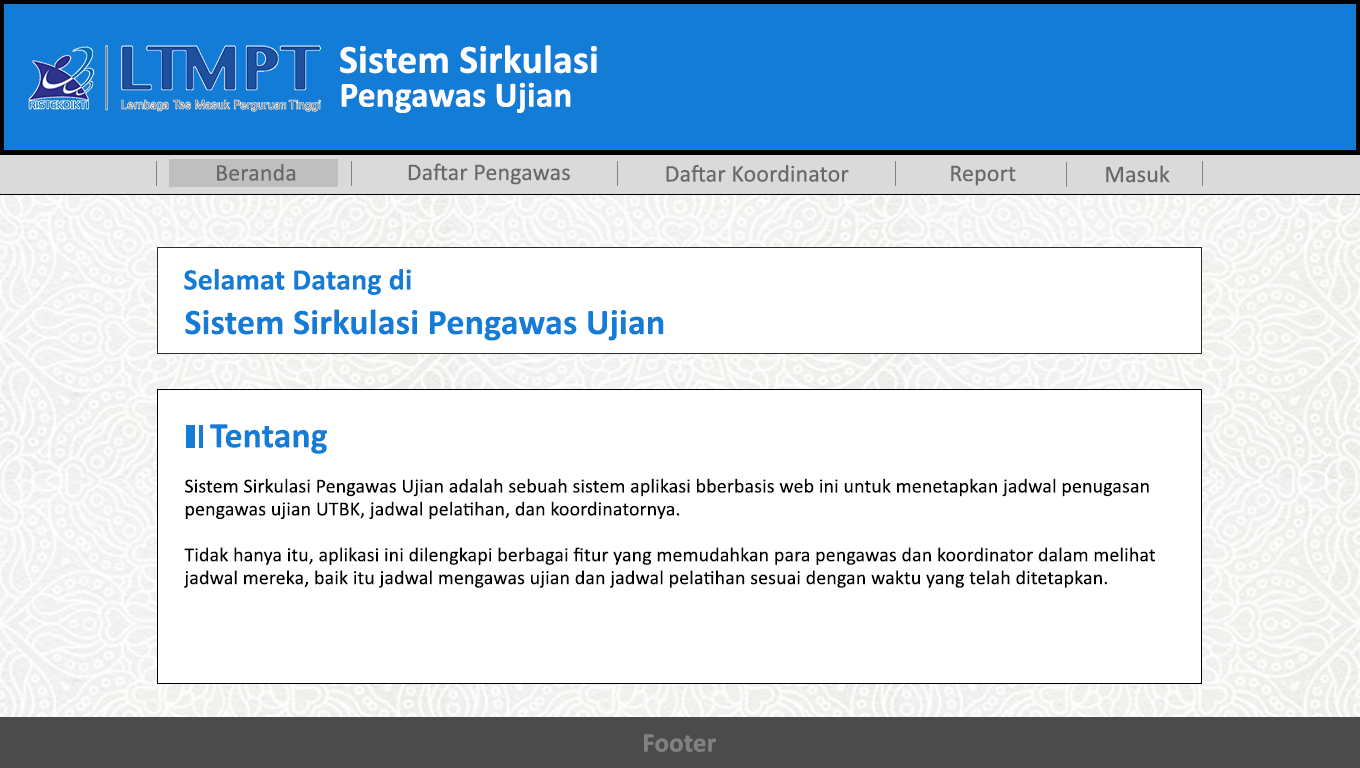
<style>
.page{position:relative;width:1360px;height:768px;background:#ffffff}
.page>*{position:absolute;margin:0}
.t1{font:40.1px "Calibri-Bold";letter-spacing:0.005em;color:#fdfdfd}
.t2{font:35.6px "Calibri-Bold";letter-spacing:0.005em;color:#fffefe}
.t3{font:24px "Calibri";letter-spacing:0.005em;color:#6a6969}
.t4{font:30px "Calibri-Bold";letter-spacing:0.005em;color:#127cd7}
.t5{font:36px "Calibri-Bold";letter-spacing:0.005em;color:#127cd7}
.t6{font:20px/22.9px "Calibri";letter-spacing:0.005em;color:#010102}
.t7{font:27px "Calibri-Bold";letter-spacing:0.005em;color:#818181}
</style>
<div class="page">
<p class="t1" style="left:340px;top:45px;width:257px;height:29px">Sistem Sirkulasi</p>
<p class="t2" style="left:341px;top:82px;width:230px;height:31px">Pengawas Ujian</p>
<p class="t3" style="left:217px;top:164px;width:79px;height:17px">Beranda</p>
<p class="t3" style="left:408px;top:163px;width:162px;height:22px">Daftar Pengawas</p>
<p class="t3" style="left:666px;top:165px;width:183px;height:17px">Daftar Koordinator</p>
<p class="t3" style="left:951px;top:165px;width:65px;height:21px">Report</p>
<p class="t3" style="left:1106px;top:165px;width:64px;height:18px">Masuk</p>
<p class="t4" style="left:184px;top:269px;width:227px;height:26px">Selamat Datang di</p>
<p class="t5" style="left:185px;top:309px;width:479px;height:32px">Sistem Sirkulasi Pengawas Ujian</p>
<p class="t5" style="left:210px;top:424px;width:117px;height:30px">Tentang</p>
<p class="t6" style="left:183px;top:478px;width:972px;height:110px">Sistem Sirkulasi Pengawas Ujian adalah sebuah sistem aplikasi bberbasis web ini untuk menetapkan jadwal penugasan<br>pengawas ujian UTBK, jadwal pelatihan, dan koordinatornya.<br><br>Tidak hanya itu, aplikasi ini dilengkapi berbagai fitur yang memudahkan para pengawas dan koordinator dalam melihat<br>jadwal mereka, baik itu jadwal mengawas ujian dan jadwal pelatihan sesuai dengan waktu yang telah ditetapkan.</p>
<p class="t7" style="left:644px;top:734px;width:72px;height:18px">Footer</p>
</div>
